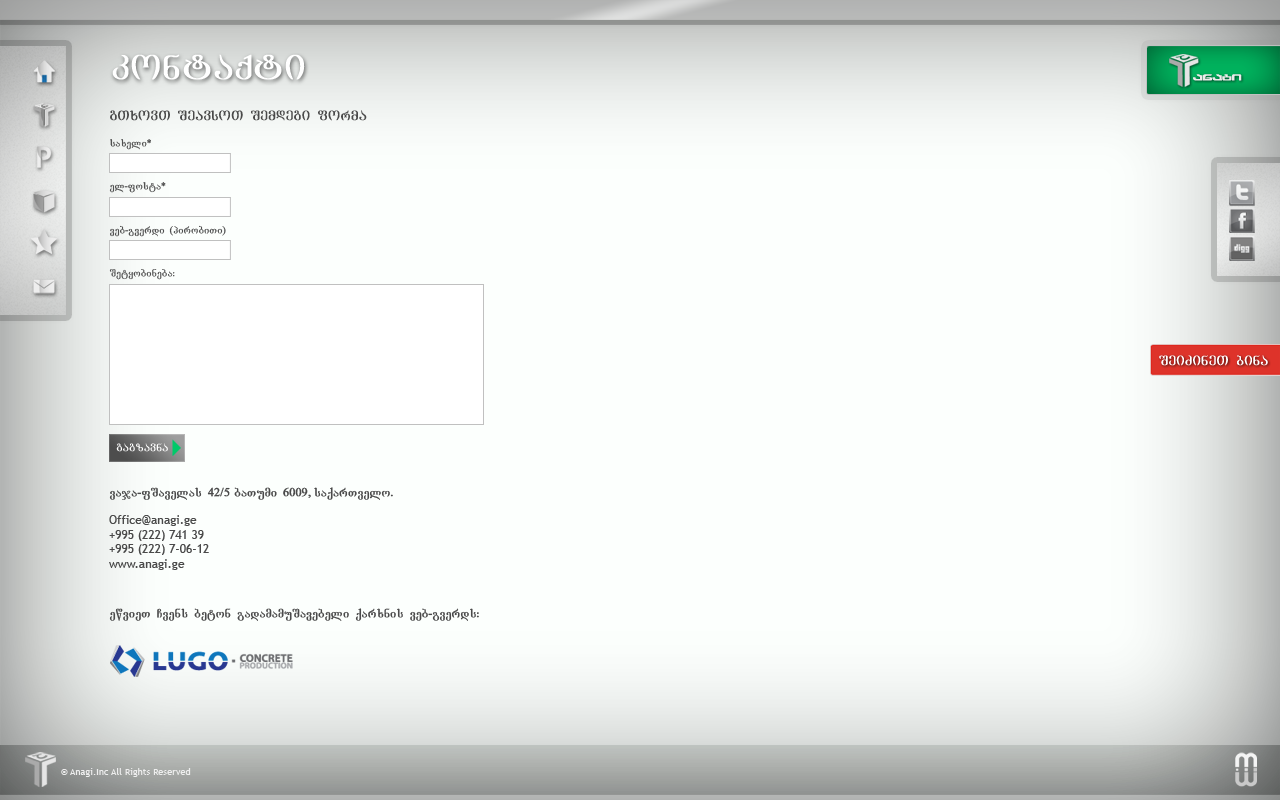
<style>
.page{position:relative;width:1280px;height:800px;background:#fcfffd}
.page>*{position:absolute;margin:0}
.t1{font:36px "AcadMtavr";color:#ffffff;font-weight:bold}
.t2{font:14px "AcadMtavr";color:#4a4a4a;font-weight:bold}
.t3{font:10px "AcadNusx";color:#505050;font-weight:bold}
.t4{font:14px "AcadMtavr";color:#ffffff;font-weight:bold}
.t5{font:11px "AcadMtavr";color:#ffffff;font-weight:bold}
.t6{font:12px "TrebuchetMS";color:#4a4a4a}
.t7{font:12px "AcadNusx";color:#4a4a4a;font-weight:bold}
.t8{font:9.4px "TrebuchetMS";color:#eeeeee}
</style>
<div class="page">
<p class="t1" style="left:112px;top:54px;width:193px;height:26px">kontaqti</p>
<p class="t2" style="left:110px;top:110px;width:257px;height:11px">gTxovT SeavsoT Semdegi forma</p>
<p class="t3" style="left:110px;top:139px;width:41px;height:11px">saxeli*</p>
<p class="t3" style="left:109px;top:182px;width:57px;height:11px">el-fosta*</p>
<p class="t3" style="left:110px;top:225px;width:116px;height:12px">veb-gverdi (pirobiTi)</p>
<p class="t3" style="left:109px;top:269px;width:66px;height:11px">Setyobineba:</p>
<p class="t4" style="left:1159px;top:355px;width:109px;height:11px">SeiZineT bina</p>
<p class="t5" style="left:116px;top:443px;width:52px;height:9px">gagzavna</p>
<p class="t6" style="left:109px;top:487px;width:284px;height:83px"><span class="t7">vaja-fSavelas 42/5 baTumi 6009, saqarTvelo.<br><br></span>Office@anagi.ge<br>+995 (222) 741 39<br>+995 (222) 7-06-12<br>www.anagi.ge</p>
<p class="t7" style="left:109px;top:608px;width:370px;height:13px">ewvieT Cvens beton gadamamuSavebeli qarxnis veb-gverds:</p>
<p class="t8" style="left:61px;top:768px;width:130px;height:9px">© Anagi.Inc All Rights Reserved</p>
</div>
